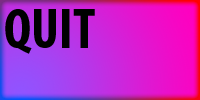
<style>
.page{position:relative;width:200px;height:100px}
.page>*{position:absolute;margin:0}
.t1{font:56.5px "MyriadPro-BoldCond";color:#000000}
</style>
<div class="page">
<p class="t1" style="left:5px;top:9px;width:90px;height:45px">QUIT</p>
</div>
